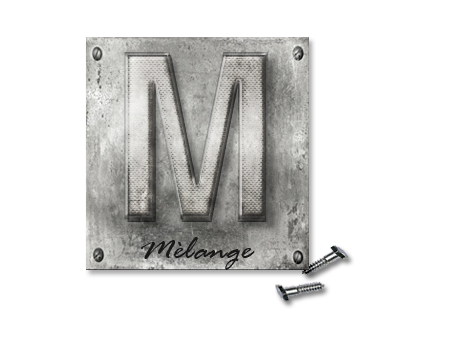
<style>
.page{position:relative;width:454px;height:340px;background:#ffffff}
.page>*{position:absolute;margin:0}
.t1{font:36px "RageItalic";color:#181818}
</style>
<div class="page">
<p class="t1" style="left:141px;top:237px;width:114px;height:33px">Mèlange</p>
</div>
